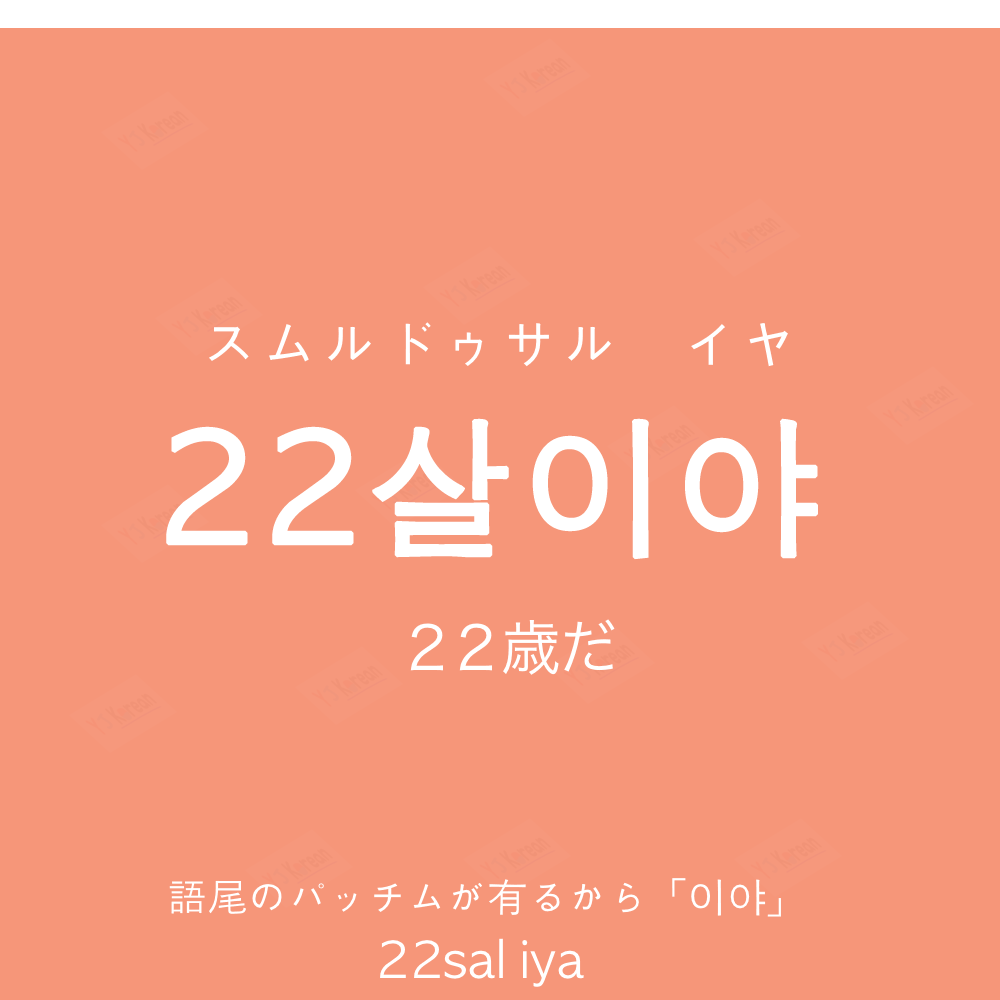
<style>
.page{position:relative;width:1000px;height:1000px;background:#f69679}
.page>*{position:absolute;margin:0}
.t1{font:60px "AppleGothic";color:#ffffff}
.t2{font:150px "AppleGothic";color:#ffffff;font-weight:bold}
.t3{font:60px "HiraKakuProN-W3";color:#ffffff}
.t4{font:40px "AppleGothic";color:#ffffff}
.t5{font:50px "AppleGothic";color:#ffffff}
</style>
<div class="page">
<p class="t1" style="left:209px;top:322px;width:579px;height:45px">スムルドゥサル　イヤ</p>
<p class="t2" style="left:166px;top:418px;width:652px;height:142px">22살이야</p>
<p class="t3" style="left:410px;top:619px;width:205px;height:56px">２２歳だ</p>
<p class="t4" style="left:169px;top:878px;width:612px;height:39px">語尾のパッチムが有るから「이야」</p>
<p class="t5" style="left:380px;top:938px;width:204px;height:49px">22sal iya</p>
</div>
